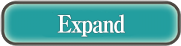
<style>
.page{position:relative;width:181px;height:46px;background:#239e9f}
.page>*{position:absolute;margin:0}
.t1{font:24px "RyuminPro-ExBold";letter-spacing:-0.08em;color:#ffffff;scale:0.9 1}
</style>
<div class="page">
<p class="t1" style="left:57px;top:14px;width:68px;height:23px">Expand</p>
</div>
